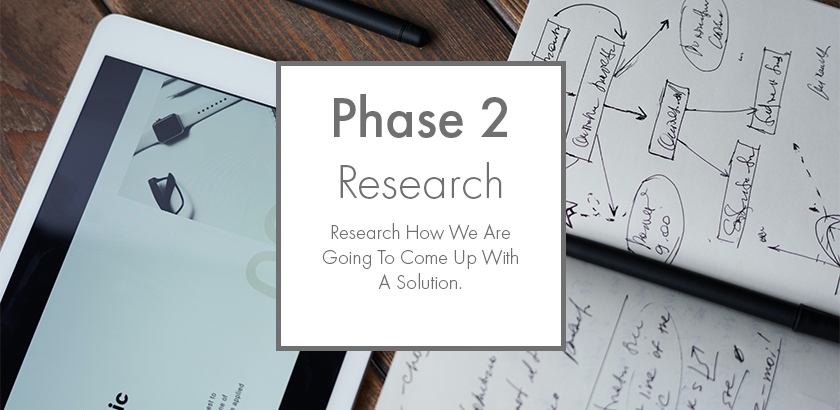
<style>
.page{position:relative;width:840px;height:410px;background:#ffffff}
.page>*{position:absolute;margin:0}
.t1{font:58.3px "FuturaPT-Medium";color:#707070}
.t2{font:50px "FuturaPT-Light";color:#707070}
.t3{font:20.8px "FuturaPT-Light";color:#707070}
</style>
<div class="page">
<p class="t1" style="left:334px;top:94px;width:173px;height:44px">Phase 2</p>
<p class="t2" style="left:340px;top:162px;width:162px;height:37px">Research</p>
<p class="t3" style="left:322px;top:223px;width:196px;height:66px;text-align:center">Research How We Are Going To Come Up With A Solution.</p>
</div>
